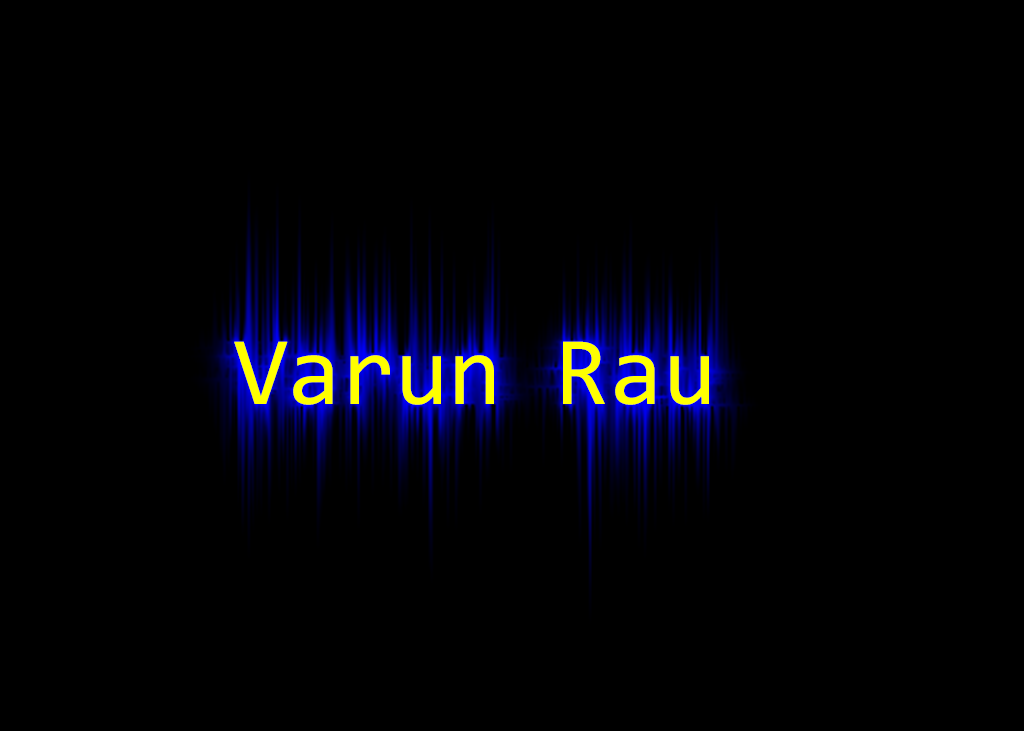
<style>
.page{position:relative;width:1024px;height:731px;background:#000000}
.page>*{position:absolute;margin:0}
.t1{font:97.5px "Consolas";color:#ffff00}
</style>
<div class="page">
<p class="t1" style="left:234px;top:341px;width:475px;height:64px">Varun Rau</p>
</div>
